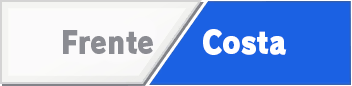
<style>
.page{position:relative;width:352px;height:86px;background:#1b61e3}
.page>*{position:absolute;margin:0}
.t1{font:30.7px "RodinPro-UB";letter-spacing:-0.011em;color:#8b8c92;scale:0.87 1}
.t2{font:30.7px "RodinPro-UB";letter-spacing:-0.011em;color:#ffffff;scale:0.91 1}
</style>
<div class="page">
<p class="t1" style="left:63px;top:30px;width:90px;height:24px">Frente</p>
<p class="t2" style="left:203px;top:29px;width:84px;height:26px">Costa</p>
</div>
